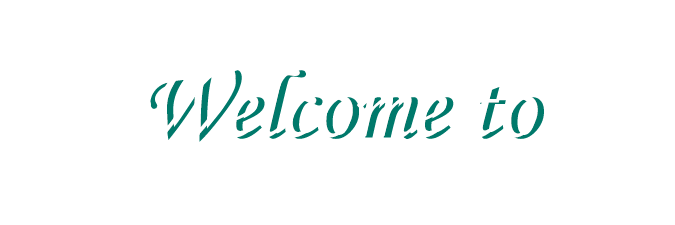
<style>
.page{position:relative;width:675px;height:225px;background:#ffffff}
.page>*{position:absolute;margin:0}
.t1{font:97.3px "MonotypeCorsiva";color:#00796b}
</style>
<div class="page">
<p class="t1" style="left:150px;top:70px;width:394px;height:72px">Welcome to</p>
</div>
